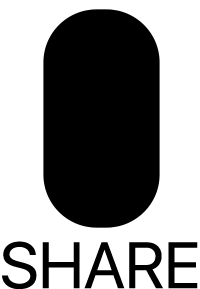
<style>
.page{position:relative;width:200px;height:289px;background:#ffffff}
.page>*{position:absolute;margin:0}
.t1{font:64.9px "SFUIDisplay-Regular";color:#000000}
</style>
<div class="page">
<p class="t1" style="left:2px;top:241px;width:196px;height:48px">SHARE</p>
</div>
